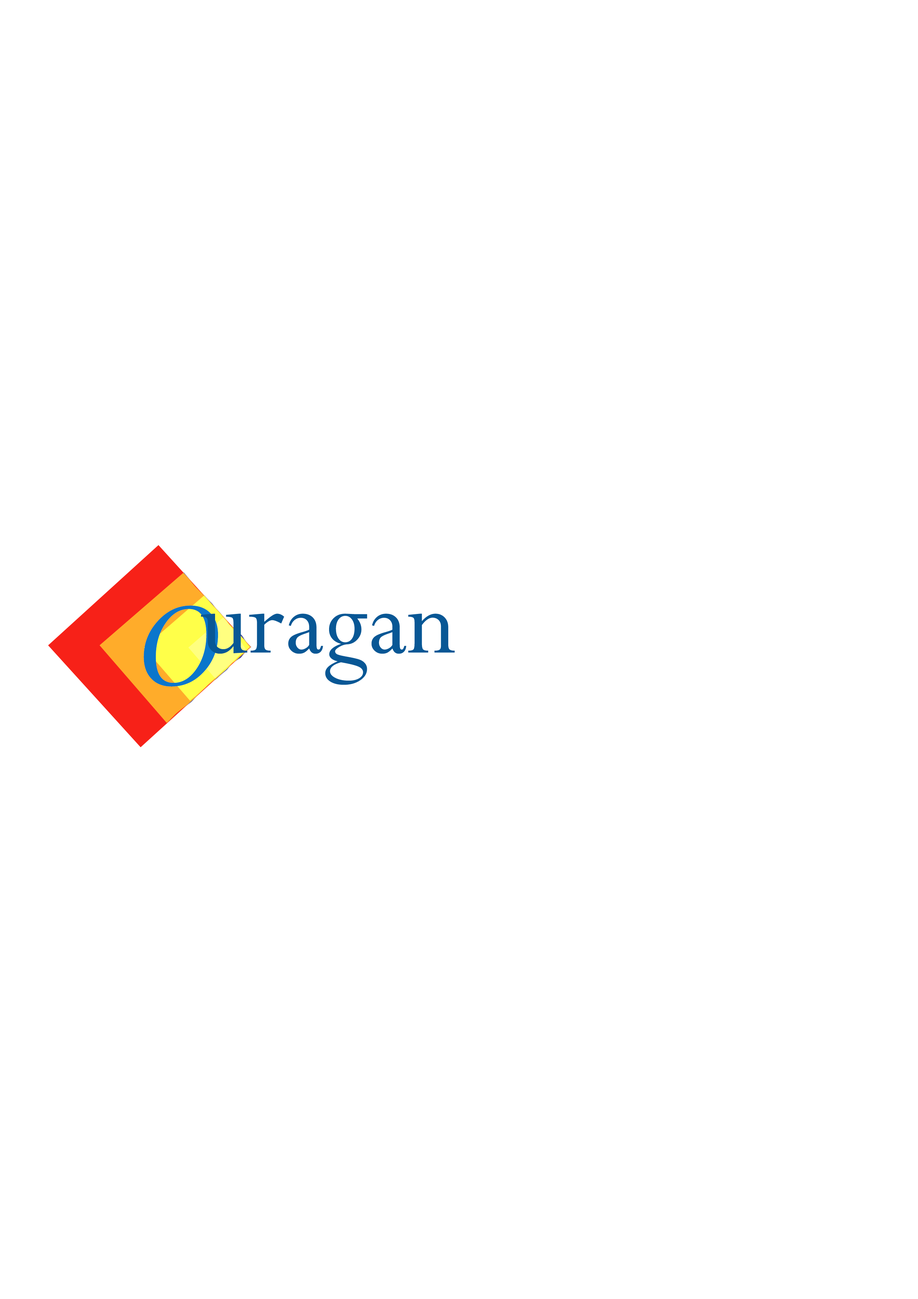
<style>
.page{position:relative;width:918px;height:1299px;background:#ffffff}
.page>*{position:absolute;margin:0}
.t1{font:106.4px "LucidaCalligraphy-Italic";color:#0a76cc}
.t2{font:106.4px "Perpetua";color:#085795}
</style>
<div class="page">
<p class="t1" style="left:144px;top:605px;width:74px;height:81px">O</p>
<p class="t2" style="left:201px;top:613px;width:254px;height:72px">uragan</p>
</div>
